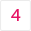
<style>
.page{position:relative;width:31px;height:31px;background:#ffffff}
.page>*{position:absolute;margin:0}
.t1{font:18px "MyriadPro-Regular";color:#e51464}
</style>
<div class="page">
<p class="t1" style="left:11px;top:9px;width:10px;height:12px">4</p>
</div>
